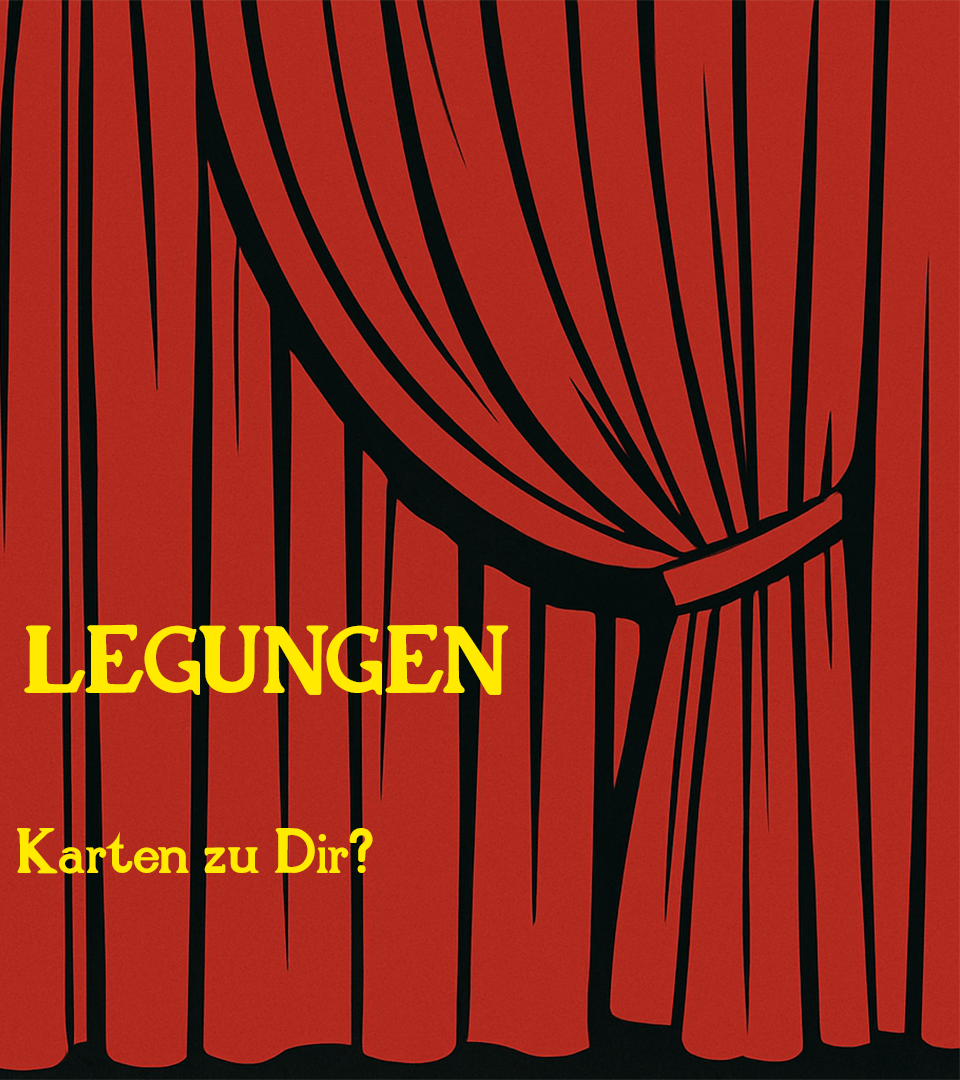
<style>
.page{position:relative;width:960px;height:1080px}
.page>*{position:absolute;margin:0}
.t1{font:60px "Tarotheque";color:#ffea00}
.t2{font:90px "Tarotheque";color:#ffea00}
</style>
<div class="page">
<p class="t1" style="left:17px;top:624px;width:492px;height:250px"><span class="t2"> LEGUNGEN <br><br></span> Karten zu Dir?</p>
</div>
